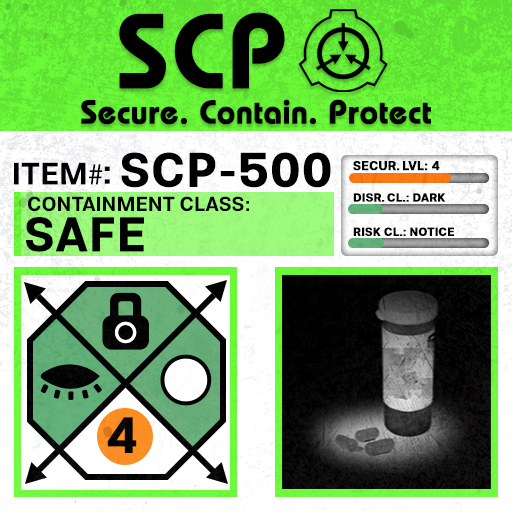
<style>
.page{position:relative;width:512px;height:512px}
.page>*{position:absolute;margin:0}
.t1{font:105.8px "BauhausLT-Demi";color:#000000;font-weight:bold}
.t2{font:33px "BauhausLT-Demi";color:#000000;font-weight:bold}
.t3{font:47.6px "Molde-Semibold";color:#000000;font-weight:bold}
.t4{font:12.5px "Molde-Semibold";color:#000000;font-weight:bold}
.t5{font:31.1px "Molde-Semibold";color:#000000}
.t6{font:31.1px "MyriadPro-Regular";color:#000000}
.t7{font:34.5px "Molde-Semibold";color:#000000}
.t8{font:20.3px "Molde-Semibold";color:#000000}
.t9{font:11.7px "Molde-Semibold";color:#000000;font-weight:bold}
.t10{font:47.8px "Molde-Semibold";color:#000000;font-weight:bold}
</style>
<div class="page">
<p class="t1" style="left:119px;top:12px;width:166px;height:77px">SCP</p>
<p class="t2" style="left:81px;top:99px;width:350px;height:26px">Secure. Contain. Protect</p>
<p class="t3" style="left:121px;top:152px;width:210px;height:36px">SCP-500</p>
<p class="t4" style="left:353px;top:161px;width:87px;height:10px">SECUR. LVL: 4</p>
<p class="t5" style="left:14px;top:162px;width:89px;height:23px">ITEM<span class="t6">#</span></p>
<p class="t7" style="left:104px;top:166px;width:6px;height:18px">:</p>
<p class="t8" style="left:28px;top:196px;width:221px;height:16px">CONTAINMENT CLASS:</p>
<p class="t9" style="left:353px;top:193px;width:93px;height:9px">DISR. CL.: DARK</p>
<p class="t10" style="left:26px;top:217px;width:118px;height:35px">SAFE</p>
<p class="t9" style="left:353px;top:227px;width:101px;height:9px">RISK CL.: NOTICE</p>
</div>
